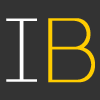
<style>
.page{position:relative;width:100px;height:100px;background:#333333}
.page>*{position:absolute;margin:0}
.t1{font:90px "Code-Light";letter-spacing:0.06em;color:#ffcc00;font-weight:bold}
</style>
<div class="page">
<p class="t1" style="left:6px;top:18px;width:89px;height:65px">IB</p>
</div>
